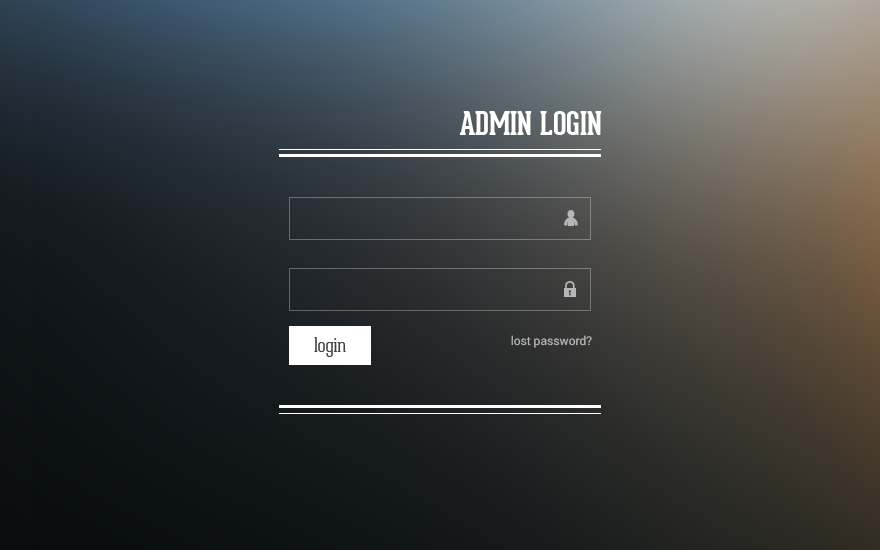
<style>
.page{position:relative;width:880px;height:550px}
.page>*{position:absolute;margin:0}
.t1{font:32px "GearedSlab-Bold";color:#ffffff;text-transform:uppercase}
.t2{font:20px "GearedSlab-Thin";color:#424242}
.t3{font:12px "Roboto-Regular";color:#b7b7b7}
</style>
<div class="page">
<p class="t1" style="left:459px;top:111px;width:143px;height:24px">Admin Login</p>
<p class="t2" style="left:314px;top:337px;width:32px;height:20px">login</p>
<p class="t3" style="left:511px;top:335px;width:81px;height:13px">lost password?</p>
</div>
